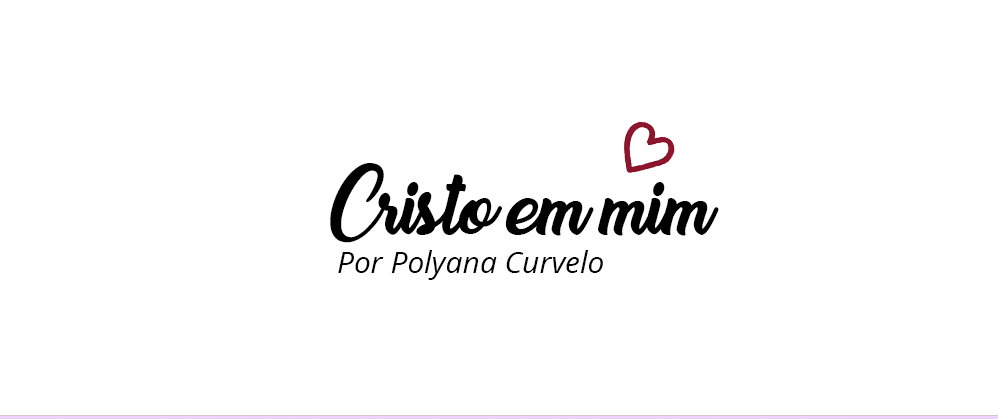
<style>
.page{position:relative;width:998px;height:419px;background:#ffffff}
.page>*{position:absolute;margin:0}
.t1{font:100px "SweetSensationsPersonalUse";color:#000000}
.t2{font:30px "OpenSans-Italic";color:#000000}
</style>
<div class="page">
<p class="t1" style="left:330px;top:163px;width:389px;height:80px">Cristo em mim</p>
<p class="t2" style="left:338px;top:250px;width:265px;height:30px">Por Polyana Curvelo</p>
</div>
